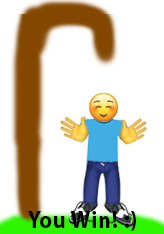
<style>
.page{position:relative;width:164px;height:234px;background:#ffffff}
.page>*{position:absolute;margin:0}
.t1{font:24.5px "MyriadPro-Bold";letter-spacing:0.04em;color:#000000;scale:0.9 1}
</style>
<div class="page">
<p class="t1" style="left:28px;top:211px;width:108px;height:20px">You Win! :)</p>
</div>
